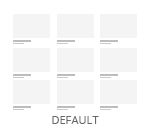
<style>
.page{position:relative;width:150px;height:130px;background:#ffffff}
.page>*{position:absolute;margin:0}
.t1{font:11px "OpenSans";color:#686868;text-transform:uppercase}
</style>
<div class="page">
<p class="t1" style="left:52px;top:116px;width:47px;height:8px">Default</p>
</div>
